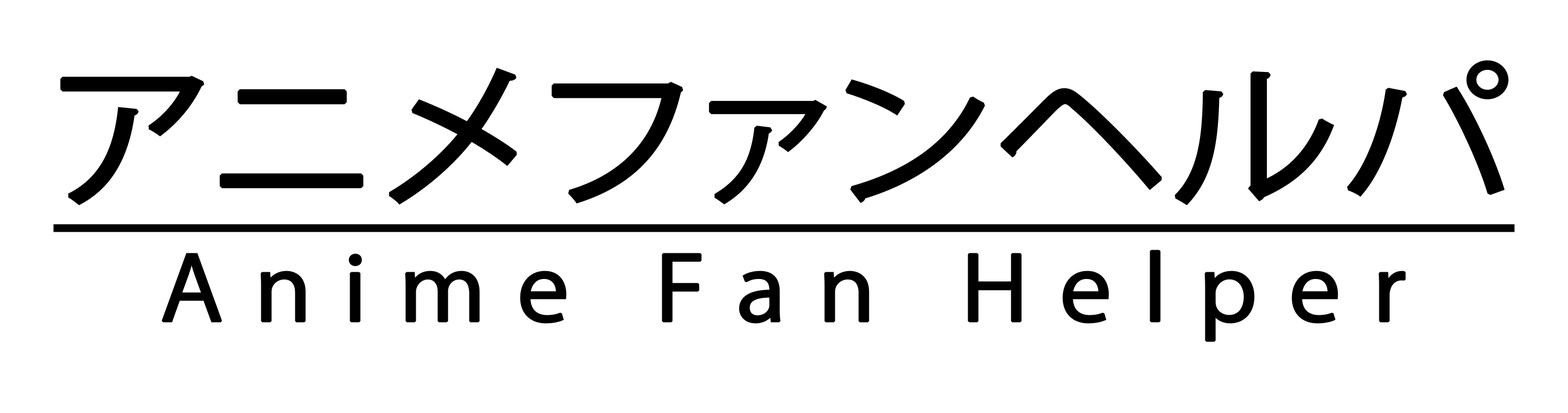
<style>
.page{position:relative;width:1568px;height:413px;background:#ffffff}
.page>*{position:absolute;margin:0}
.t1{font:153.3px "KozGoPr6N-Regular";color:#000000;font-weight:bold;text-decoration:underline;scale:1.1 1}
.t2{font:87.6px "KozGoPr6N-Regular";letter-spacing:0.3em;color:#000000;font-weight:bold;scale:1.1 1}
</style>
<div class="page">
<p class="t1" style="left:53px;top:60px;width:1462px;height:172px">アニメファンヘルパ</p>
<p class="t2" style="left:161px;top:250px;width:1245px;height:92px">Anime Fan Helper</p>
</div>
